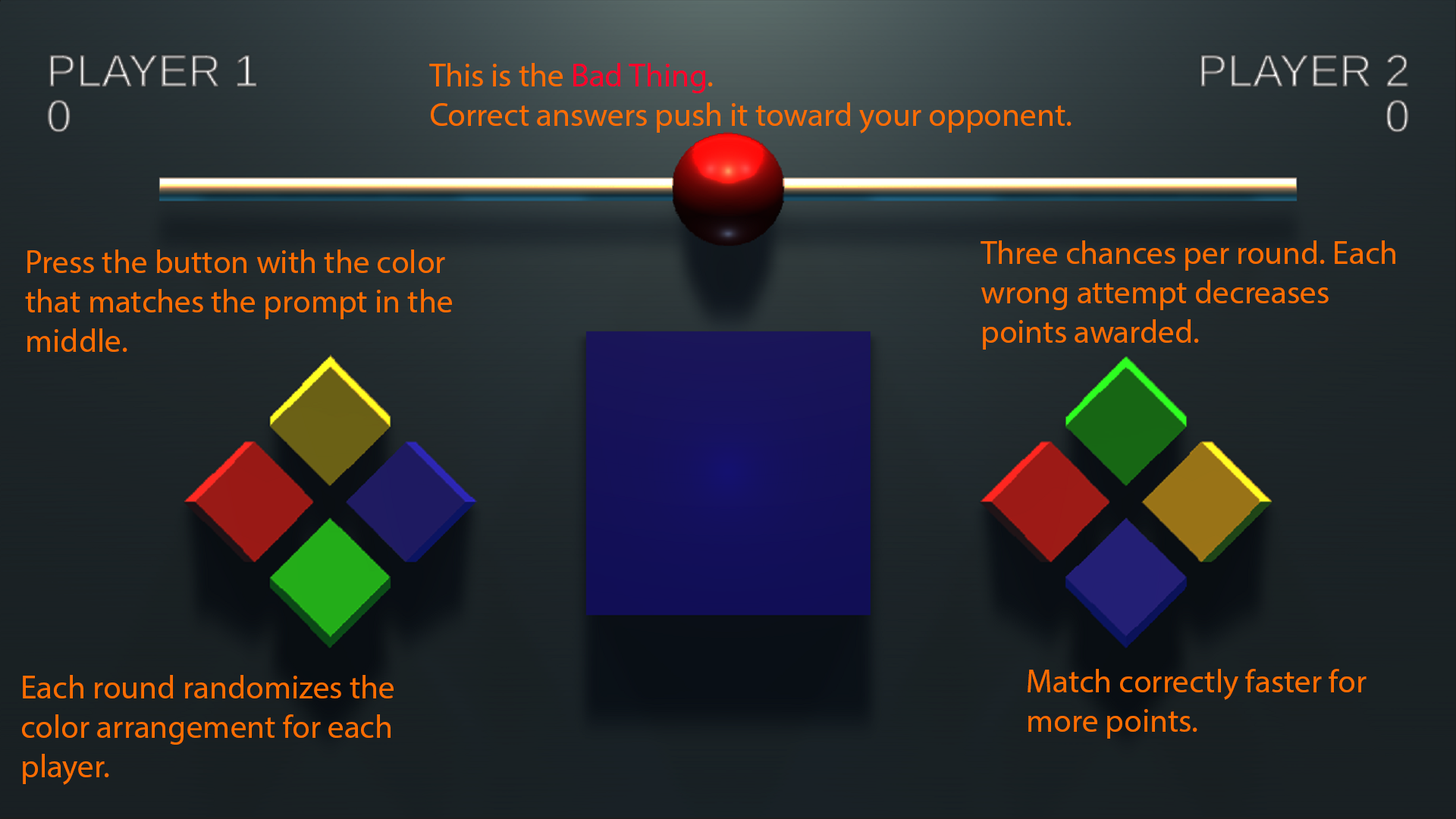
<style>
.page{position:relative;width:1456px;height:819px}
.page>*{position:absolute;margin:0}
.t1{font:32.9px "MyriadPro-Regular";color:#ff6d00}
.t2{font:32.9px "MyriadPro-Regular";color:#ff002a}
</style>
<div class="page">
<p class="t1" style="left:429px;top:63px;width:643px;height:70px">This is the <span class="t2">Bad Thing</span>.<br>Correct answers push it toward your opponent.</p>
<p class="t1" style="left:981px;top:240px;width:414px;height:110px">Three chances per round. Each wrong attempt decreases points awarded.</p>
<p class="t1" style="left:25px;top:249px;width:427px;height:103px">Press the button with the color that matches the prompt in the middle.</p>
<p class="t1" style="left:22px;top:675px;width:372px;height:110px">Each round randomizes the color arrangement for each player.</p>
<p class="t1" style="left:1028px;top:669px;width:338px;height:70px">Match correctly faster for more points.</p>
</div>
